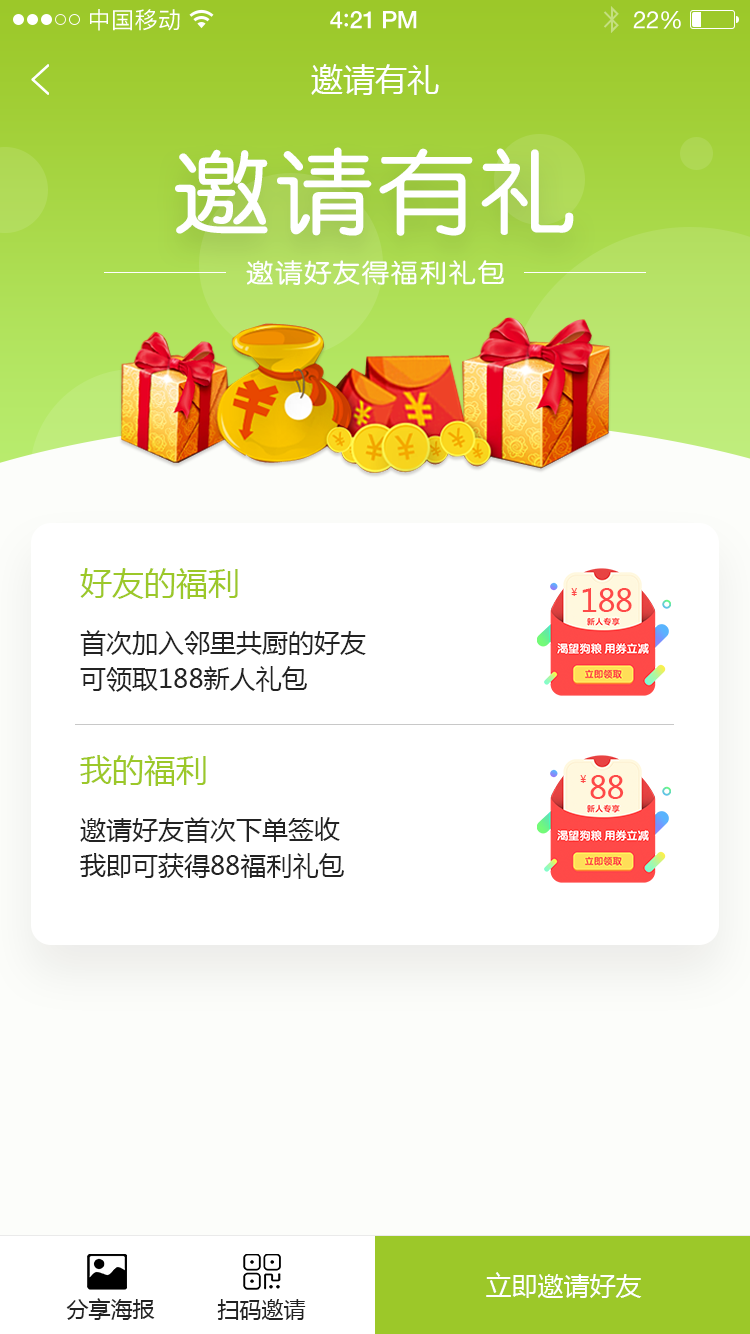
<style>
.page{position:relative;width:750px;height:1334px;background:#ffffff}
.page>*{position:absolute;margin:0}
.t1{font:23px "PingFangSC-Regular";letter-spacing:0.02em;color:#ffffff}
.t2{font:24px "HelveticaNeue-Medium";letter-spacing:-0.02em;color:#ffffff}
.t3{font:26px "Avenir-Medium";letter-spacing:-0.02em;color:#ffffff}
.t4{font:24px "HelveticaNeue";letter-spacing:-0.02em;color:#ffffff}
.t5{font:32px "MicrosoftYaHei";color:#ffffff;text-transform:uppercase}
.t6{font:91.7px "FZY3JW--GB1-0";letter-spacing:0.05em;color:#ffffff;scale:1.06 1}
.t7{font:26px "FZY3JW--GB1-0";letter-spacing:0.05em;color:#ffffff;scale:1.06 1}
.t8{font:32px "MicrosoftYaHei";color:#9cc829;text-transform:uppercase}
.t9{font:9.9px "MicrosoftYaHei";color:#fe4948;text-transform:uppercase}
.t10{font:30.8px "MicrosoftYaHei";letter-spacing:-0.02em;color:#fe4948;text-transform:uppercase}
.t11{font:26px/36px "MicrosoftYaHei";color:#232323;text-transform:uppercase}
.t12{font:26px "MicrosoftYaHei";color:#ffffff;text-transform:uppercase}
.t13{font:22px "MicrosoftYaHei";color:#232323;text-transform:uppercase}
</style>
<div class="page">
<p class="t1" style="left:90px;top:9px;width:90px;height:22px">中国移动</p>
<p class="t2" style="left:330px;top:11px;width:87px;height:18px">4<span class="t3">:</span>21 PM</p>
<p class="t4" style="left:633px;top:11px;width:48px;height:18px">22%</p>
<p class="t5" style="left:311px;top:64px;width:128px;height:31px">邀请有礼</p>
<p class="t6" style="left:175px;top:147px;width:399px;height:89px">邀请有礼</p>
<p class="t7" style="left:246px;top:260px;width:258px;height:25px">邀请好友得福利礼包</p>
<p class="t8" style="left:80px;top:568px;width:158px;height:31px">好友的福利</p>
<p class="t9" style="left:571px;top:588px;width:6px;height:8px">￥</p>
<p class="t10" style="left:582px;top:588px;width:50px;height:24px">188</p>
<p class="t11" style="left:80px;top:630px;width:286px;height:62px">首次加入邻里共厨的好友<br>可领取188新人礼包</p>
<p class="t8" style="left:80px;top:755px;width:126px;height:31px">我的福利</p>
<p class="t9" style="left:580px;top:775px;width:6px;height:8px">￥</p>
<p class="t10" style="left:590px;top:775px;width:34px;height:24px">88</p>
<p class="t11" style="left:80px;top:817px;width:264px;height:62px">邀请好友首次下单签收<br>我即可获得88福利礼包</p>
<p class="t12" style="left:486px;top:1272px;width:156px;height:26px">立即邀请好友</p>
<p class="t13" style="left:66px;top:1298px;width:89px;height:22px">分享海报</p>
<p class="t13" style="left:217px;top:1299px;width:89px;height:21px">扫码邀请</p>
</div>
